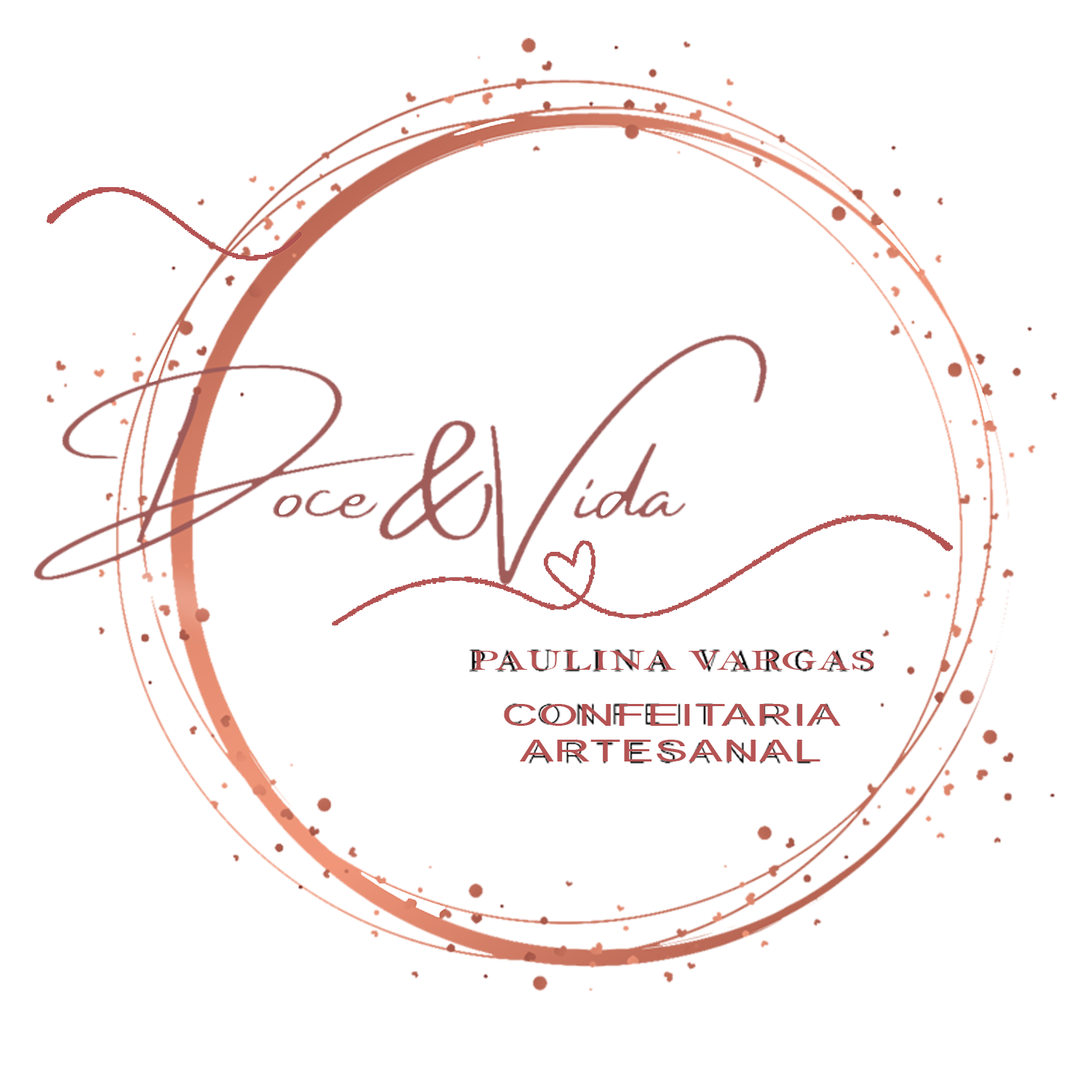
<style>
.page{position:relative;width:1092px;height:1092px;background:#ffffff}
.page>*{position:absolute;margin:0}
.t1{font:28.9px "BellMT";color:#b55353;scale:1.66 1}
.t2{font:29.6px "ArialMT";color:#b55353;scale:1.72 1}
</style>
<div class="page">
<p class="t1" style="left:472px;top:651px;width:402px;height:19px">PAULINA VARGAS</p>
<p class="t2" style="left:504px;top:704px;width:337px;height:57px;text-align:center">CONFEITARIA<br>ARTESANAL</p>
</div>
